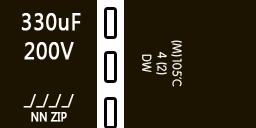
<style>
.page{position:relative;width:256px;height:128px;background:#1c1401}
.page>*{position:absolute;margin:0}
.t1{font:23.5px/29.2px "SegoeUI";letter-spacing:0.02em;color:#ffffff;font-weight:bold;scale:0.89 1}
.t2{font:15.7px/16.7px "SegoeUI";letter-spacing:0.02em;color:#ffffff;font-weight:bold;scale:0.89 1}
.t3{font:11.8px/16.7px "SegoeUI";letter-spacing:0.02em;color:#ffffff;font-weight:bold;scale:0.89 1}
.t4{font:12.5px "Vagabond";color:#ffffff}
</style>
<div class="page">
<p class="t1" style="left:21px;top:13px;width:60px;height:109px;text-align:center"><span class="t2"> </span>330uF<br>200V<br><br><span class="t2">_/_/_/_/<br></span><span class="t3">NN ZIP</span></p>
<p class="t4" style="left:142px;top:40px;width:40px;height:47px;text-align:center;rotate:90deg">(M)105’C<br>4 (2)<br>DW</p>
</div>
